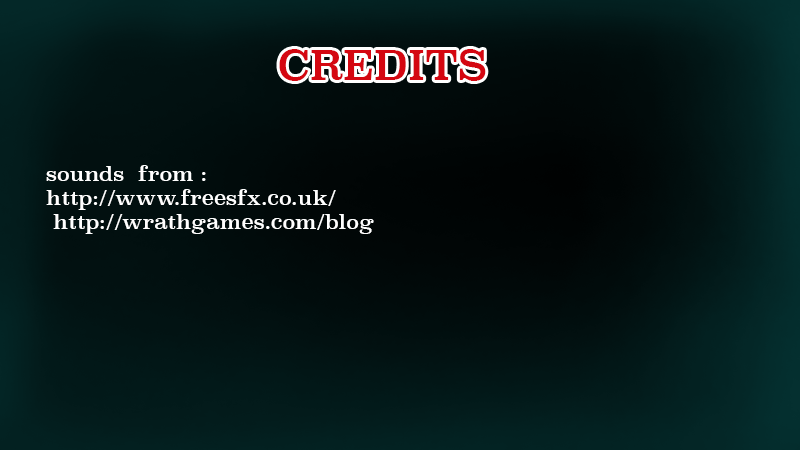
<style>
.page{position:relative;width:800px;height:450px}
.page>*{position:absolute;margin:0}
.t1{font:40.1px "Superclarendon-Regular";color:#d40711}
.t2{font:20px "Superclarendon-Regular";color:#ffffff}
</style>
<div class="page">
<p class="t1" style="left:279px;top:49px;width:207px;height:32px">CREDITS</p>
<p class="t2" style="left:46px;top:165px;width:328px;height:69px">sounds  from :<br>http://www.freesfx.co.uk/<br> http://wrathgames.com/blog</p>
</div>
